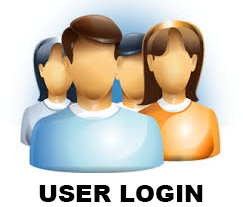
<style>
.page{position:relative;width:243px;height:207px;background:#ffffff}
.page>*{position:absolute;margin:0}
.t1{font:24px "Arial-Black";color:#000000}
</style>
<div class="page">
<p class="t1" style="left:39px;top:185px;width:164px;height:17px">USER LOGIN</p>
</div>
